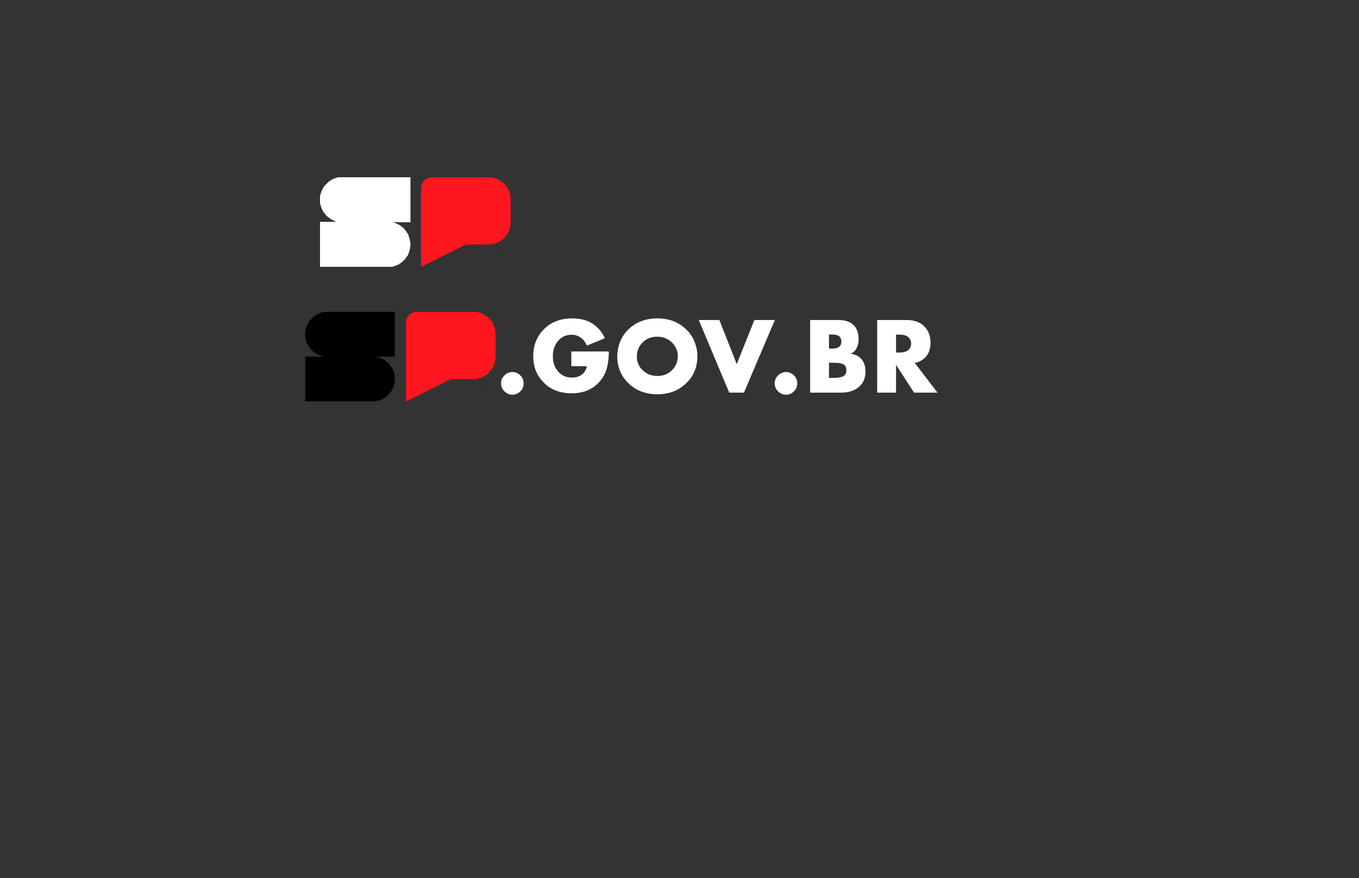
<style>
.page{position:relative;width:1359px;height:878px;background:#333333}
.page>*{position:absolute;margin:0}
.t1{font:108.7px "FuturaCyrillic-Bold";color:#ffffff}
</style>
<div class="page">
<p class="t1" style="left:501px;top:318px;width:436px;height:77px">.GOV.BR</p>
</div>
